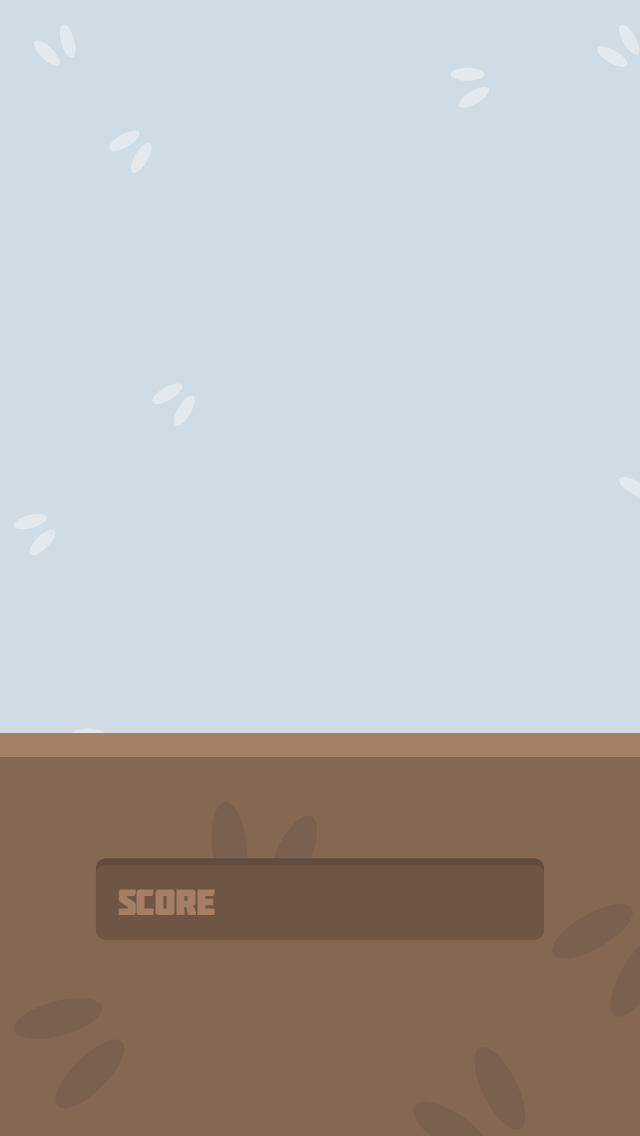
<style>
.page{position:relative;width:640px;height:1136px;background:#d0dce5}
.page>*{position:absolute;margin:0}
.t1{font:36.5px "Molot";letter-spacing:-0.02em;color:#a47f66}
</style>
<div class="page">
<p class="t1" style="left:118px;top:889px;width:97px;height:26px">Score</p>
</div>
